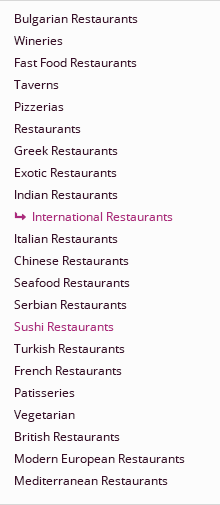
<style>
.page{position:relative;width:220px;height:505px;background:#fcfcfc}
.page>*{position:absolute;margin:0}
.t1{font:12px/22px "OpenSans";color:#390e29}
.t2{font:12px/22px "OpenSans";color:#ab2a7c}
</style>
<div class="page">
<p class="t1" style="left:14px;top:14px;width:171px;height:471px">Bulgarian Restaurants<br>Wineries<br>Fast Food Restaurants<br>Taverns<br>Pizzerias<br>Restaurants<br>Greek Restaurants<br>Exotic Restaurants<br>Indian Restaurants<br>      <span class="t2">International Restaurants<br></span>Italian Restaurants<br>Chinese Restaurants<br>Seafood Restaurants<br>Serbian Restaurants<br><span class="t2">Sushi Restaurants<br></span>Turkish Restaurants<br>French Restaurants<br>Patisseries<br>Vegetarian<br>British Restaurants<br>Modern European Restaurants<br>Mediterranean Restaurants</p>
</div>
